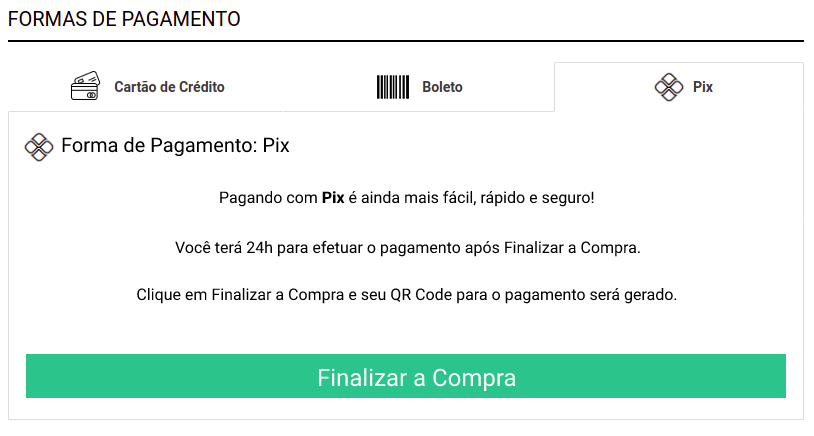
<style>
.page{position:relative;width:814px;height:436px;background:#ffffff}
.page>*{position:absolute;margin:0}
.t1{font:20px "Roboto-Regular";color:#000000}
.t2{font:16px "Roboto-Regular";color:#000000}
.t3{font:16px "Roboto-Bold";color:#000000}
.t4{font:24px "Roboto-Regular";color:#ffffff}
</style>
<div class="page">
<p class="t1" style="left:62px;top:137px;width:228px;height:20px">Forma de Pagamento: Pix</p>
<p class="t2" style="left:220px;top:190px;width:374px;height:17px">Pagando com <span class="t3">Pix </span>é ainda mais fácil, rápido e seguro!</p>
<p class="t2" style="left:175px;top:240px;width:465px;height:17px">Você terá 24h para efetuar o pagamento após Finalizar a Compra.</p>
<p class="t2" style="left:137px;top:288px;width:540px;height:16px">Clique em Finalizar a Compra e seu QR Code para o pagamento será gerado.</p>
<p class="t4" style="left:318px;top:368px;width:198px;height:23px">Finalizar a Compra</p>
</div>
